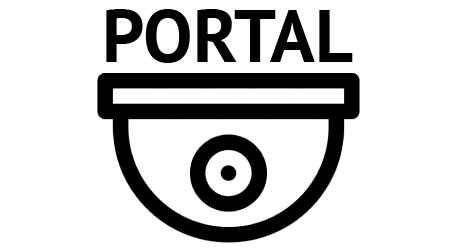
<style>
.page{position:relative;width:452px;height:249px;background:#ffffff}
.page>*{position:absolute;margin:0}
.t1{font:74px "PTSans-Bold";color:#000000}
</style>
<div class="page">
<p class="t1" style="left:106px;top:9px;width:247px;height:54px">PORTAL</p>
</div>
